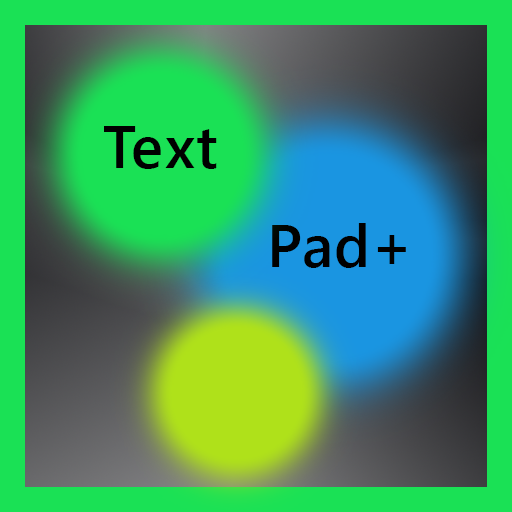
<style>
.page{position:relative;width:512px;height:512px;background:#1ae155}
.page>*{position:absolute;margin:0}
.t1{font:60px "SegoeUI-Semibold";letter-spacing:0.02em;color:#000000}
</style>
<div class="page">
<p class="t1" style="left:104px;top:126px;width:113px;height:43px">Text</p>
<p class="t1" style="left:272px;top:223px;width:134px;height:45px">Pad+</p>
</div>
